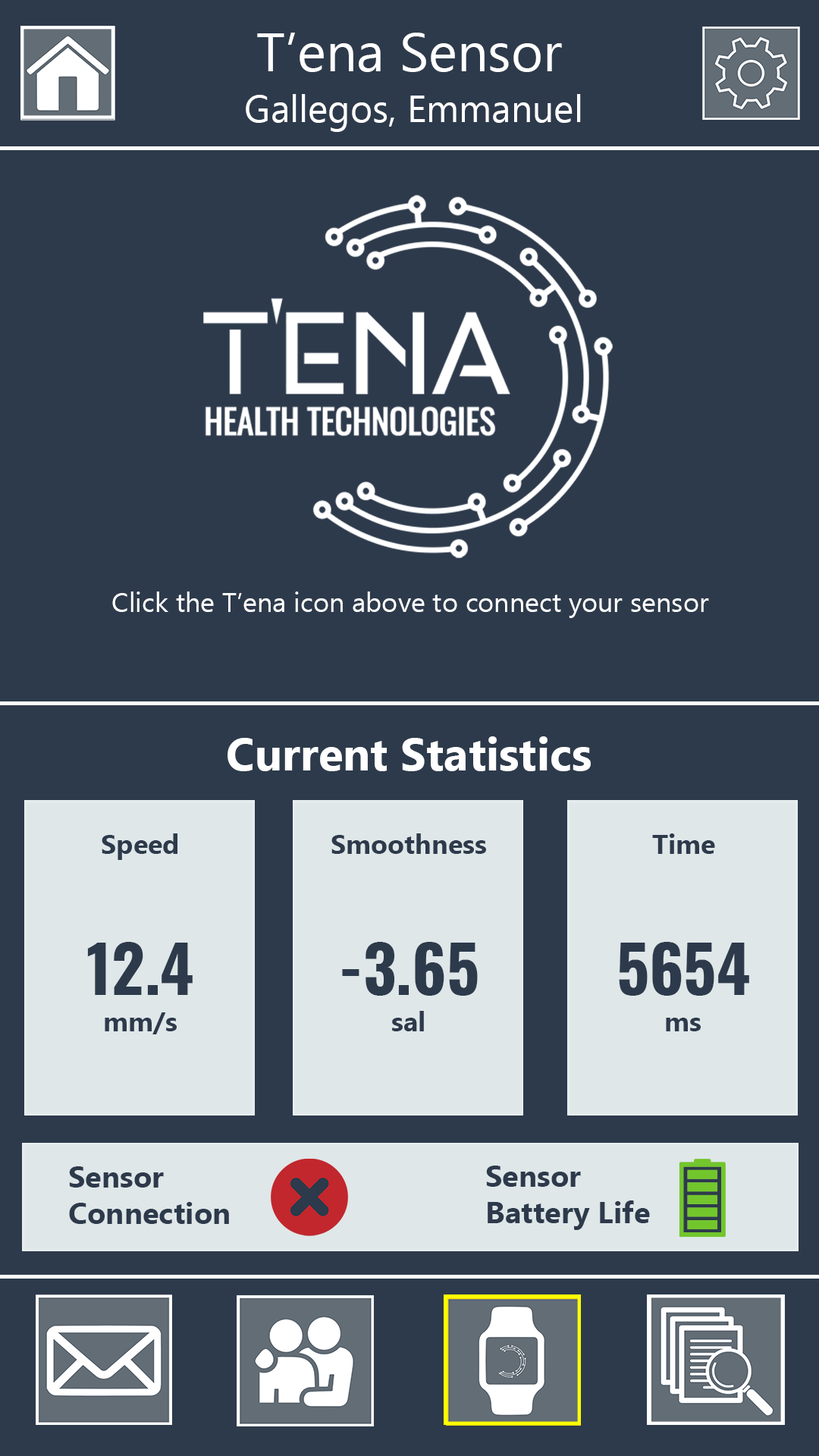
<style>
.page{position:relative;width:819px;height:1456px;background:#2d3a4b}
.page>*{position:absolute;margin:0}
.t1{font:54.6px "Ebrima";color:#ffffff}
.t2{font:37.9px "Ebrima";color:#ffffff}
.t3{font:27.3px "Ebrima";color:#ffffff}
.t4{font:45.5px "Ebrima-Bold";color:#ffffff}
.t5{font:27.3px "Ebrima-Bold";color:#2d3a4b}
.t6{font:64.5px "Oswald-Bold";color:#2d3a4b}
.t7{font:30.3px "Ebrima-Bold";color:#2d3a4b}
</style>
<div class="page">
<p class="t1" style="left:257px;top:33px;width:305px;height:39px">T’ena Sensor</p>
<p class="t2" style="left:246px;top:94px;width:335px;height:38px">Gallegos, Emmanuel</p>
<p class="t3" style="left:112px;top:591px;width:597px;height:27px">Click the T’ena icon above to connect your sensor</p>
<p class="t4" style="left:227px;top:736px;width:364px;height:35px">Current Statistics</p>
<p class="t5" style="left:102px;top:833px;width:75px;height:27px">Speed</p>
<p class="t5" style="left:331px;top:833px;width:155px;height:21px">Smoothness</p>
<p class="t5" style="left:652px;top:833px;width:63px;height:21px">Time</p>
<p class="t6" style="left:87px;top:942px;width:106px;height:53px">12.4</p>
<p class="t6" style="left:342px;top:942px;width:136px;height:54px">-3.65</p>
<p class="t6" style="left:619px;top:942px;width:130px;height:54px">5654</p>
<p class="t5" style="left:105px;top:1012px;width:72px;height:22px">mm/s</p>
<p class="t5" style="left:392px;top:1011px;width:32px;height:20px">sal</p>
<p class="t5" style="left:666px;top:1018px;width:35px;height:13px">ms</p>
<p class="t7" style="left:69px;top:1166px;width:160px;height:58px">Sensor <br>Connection</p>
<p class="t7" style="left:486px;top:1166px;width:164px;height:64px">Sensor <br>Battery Life</p>
</div>
